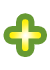
<style>
.page{position:relative;width:50px;height:70px;background:#ffffff}
.page>*{position:absolute;margin:0}
.t1{font:64px "OCRAStd"}
</style>
<div class="page">
<p class="t1" style="left:9px;top:19px;width:32px;height:32px">+</p>
</div>
